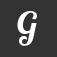
<style>
.page{position:relative;width:57px;height:57px;background:#333333}
.page>*{position:absolute;margin:0}
.t1{font:36px "Lobster1.4";color:#ffffff}
</style>
<div class="page">
<p class="t1" style="left:17px;top:11px;width:20px;height:35px">G</p>
</div>
